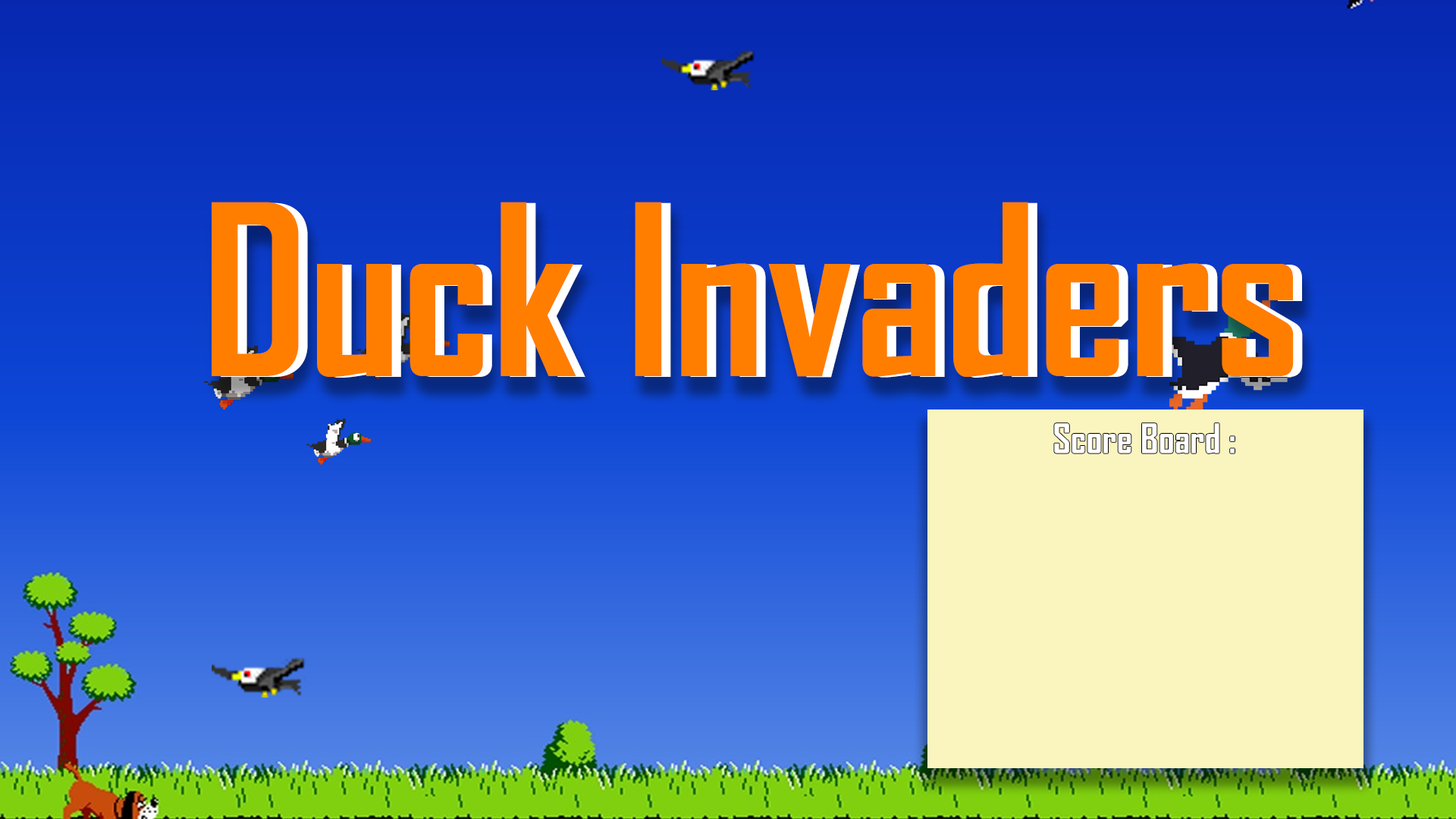
<style>
.page{position:relative;width:1456px;height:819px}
.page>*{position:absolute;margin:0}
.t1{font:227.5px "AgencyFB-Bold";color:#ff7e00}
.t2{font:39.1px "AgencyFB-Bold";color:#ffffff}
</style>
<div class="page">
<p class="t1" style="left:212px;top:202px;width:1082px;height:175px">Duck Invaders</p>
<p class="t1" style="left:221px;top:202px;width:1082px;height:176px">Duck Invaders</p>
<p class="t2" style="left:1054px;top:423px;width:181px;height:30px">Score Board :</p>
</div>
